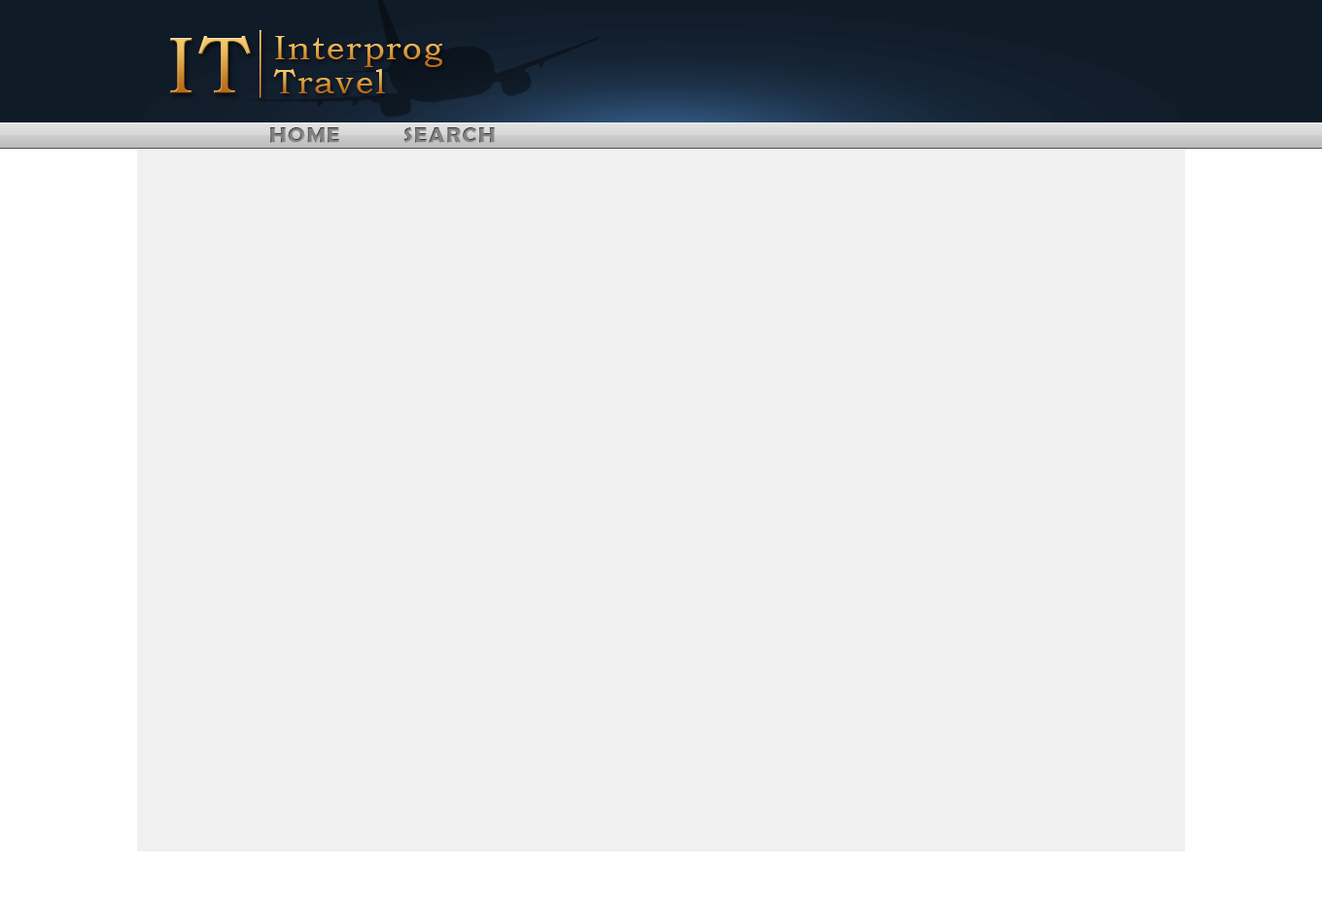
<style>
.page{position:relative;width:1322px;height:902px;background:#f0f0f0}
.page>*{position:absolute;margin:0}
.t1{font:81.5px "BookmanOldStyle";letter-spacing:0.054em}
.t2{font:34px "BookmanOldStyle";letter-spacing:0.054em}
.t3{font:23.3px "BerlinSansFBDemi-Bold";letter-spacing:0.054em}
</style>
<div class="page">
<p class="t1" style="left:170px;top:36px;width:81px;height:57px">IT</p>
<p class="t2" style="left:275px;top:36px;width:167px;height:31px">Interprog</p>
<p class="t2" style="left:273px;top:69px;width:112px;height:24px">Travel</p>
<p class="t3" style="left:270px;top:127px;width:69px;height:16px">HOME</p>
<p class="t3" style="left:403px;top:127px;width:92px;height:16px">SEARCH</p>
</div>
